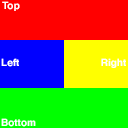
<style>
.page{position:relative;width:128px;height:128px;background:#ff0000}
.page>*{position:absolute;margin:0}
.t1{font:10px "Helvetica-Bold";color:#ffffff}
</style>
<div class="page">
<p class="t1" style="left:2px;top:1px;width:18px;height:10px">Top</p>
<p class="t1" style="left:1px;top:58px;width:18px;height:9px">Left</p>
<p class="t1" style="left:101px;top:58px;width:25px;height:10px">Right</p>
<p class="t1" style="left:1px;top:118px;width:35px;height:9px">Bottom</p>
</div>
